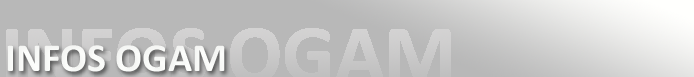
<style>
.page{position:relative;width:694px;height:77px;background:#b8b8b8}
.page>*{position:absolute;margin:0}
.t1{font:40px "Calibri-Bold";color:#fefffd}
</style>
<div class="page">
<p class="t1" style="left:7px;top:45px;width:218px;height:27px">INFOS OGAM</p>
</div>
